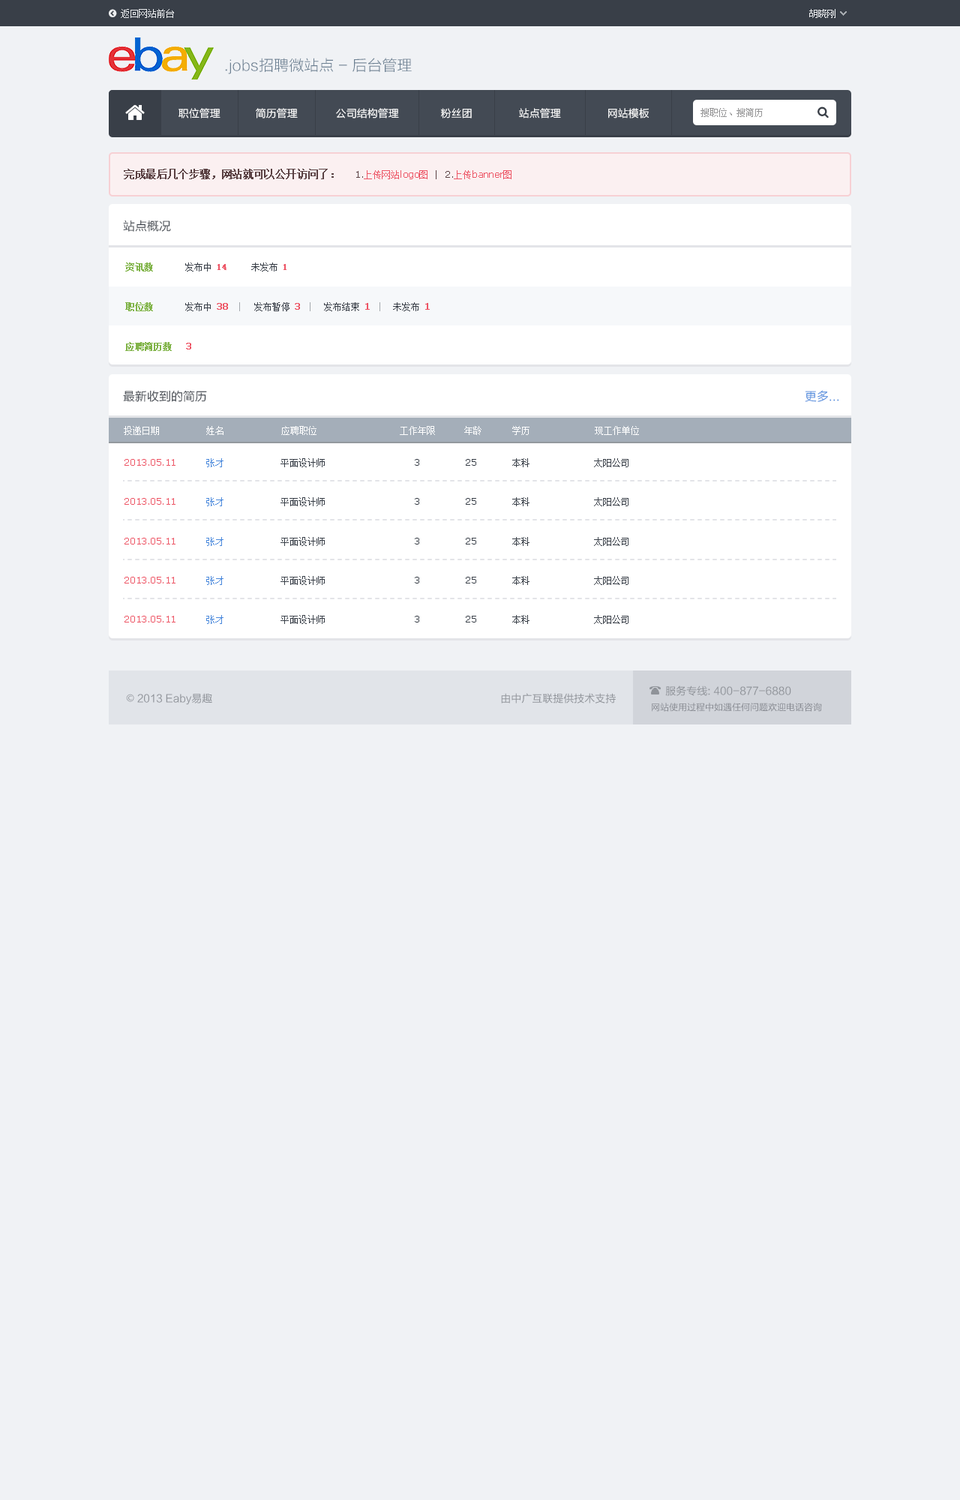
<style>
.page{position:relative;width:960px;height:1500px;background:#f0f2f5}
.page>*{position:absolute;margin:0}
.t1{font:9px "SimSun";color:#eceef0}
.t2{font:15px "FZLTXHK";color:#6c8092}
.t3{font:10.5px "FZLTXHK";color:#ffffff}
.t4{font:9px "SimSun";color:#959596}
.t5{font:10.5px "SimSun";color:#5a4143;font-weight:bold}
.t6{font:9px "Verdana";color:#ed5565}
.t7{font:9px "Verdana";color:#5a4143}
.t8{font:9px "SimSun";color:#ed5565}
.t9{font:12px "FZLTXHK";color:#393f48}
.t10{font:9px "SimSun";color:#81b449;font-weight:bold}
.t11{font:9px "SimSun";color:#393f48}
.t12{font:9px "SimSun";color:#ed5565;font-weight:bold}
.t13{font:9px "Verdana";color:#ed5565;font-weight:bold}
.t14{font:12px "FZLTXHK";color:#4b89dc}
.t15{font:9px "SimSun";color:#ffffff}
.t16{font:9px "SimSun";color:#4b89dc}
.t17{font:9px "Verdana";color:#393f48}
.t18{font:10.5px "FZLTHK--GBK1-0";color:#8f9399}
.t19{font:10.5px "AdobeHeitiStd-Regular";color:#8f9399}
.t20{font:9px "FZLTHJW--GB1-0";color:#868990}
</style>
<div class="page">
<p class="t1" style="left:121px;top:9px;width:53px;height:9px">返回网站前台</p>
<p class="t1" style="left:809px;top:9px;width:27px;height:9px">胡晓刚</p>
<p class="t2" style="left:225px;top:58px;width:187px;height:16px">.jobs招聘微站点 - 后台管理</p>
<p class="t3" style="left:178px;top:108px;width:42px;height:10px">职位管理</p>
<p class="t3" style="left:256px;top:108px;width:42px;height:10px">简历管理</p>
<p class="t3" style="left:336px;top:108px;width:63px;height:10px">公司结构管理</p>
<p class="t3" style="left:441px;top:108px;width:31px;height:10px">粉丝团</p>
<p class="t3" style="left:519px;top:108px;width:42px;height:10px">站点管理</p>
<p class="t3" style="left:608px;top:108px;width:41px;height:10px">网站模板</p>
<p class="t4" style="left:700px;top:108px;width:63px;height:9px">搜职位、搜简历</p>
<p class="t5" style="left:124px;top:169px;width:210px;height:10px">完成最后几个步骤，网站就可以公开访问了：</p>
<p class="t6" style="left:356px;top:170px;width:156px;height:9px"><span class="t7">1.</span><span class="t8">上传网站</span>logo<span class="t8">图  </span><span class="t7">|  2.</span><span class="t8">上传</span>banner<span class="t8">图</span></p>
<p class="t9" style="left:123px;top:220px;width:48px;height:12px">站点概况</p>
<p class="t10" style="left:125px;top:262px;width:28px;height:10px">资讯数</p>
<p class="t11" style="left:185px;top:262px;width:41px;height:10px">发布中 <span class="t12">14</span></p>
<p class="t11" style="left:251px;top:262px;width:35px;height:10px">未发布 <span class="t12">1</span></p>
<p class="t10" style="left:125px;top:302px;width:28px;height:9px">职位数</p>
<p class="t11" style="left:185px;top:302px;width:43px;height:9px">发布中 <span class="t13">38</span></p>
<p class="t11" style="left:254px;top:302px;width:46px;height:9px">发布暂停 <span class="t13">3</span></p>
<p class="t11" style="left:324px;top:302px;width:46px;height:9px">发布结束 <span class="t13">1</span></p>
<p class="t11" style="left:393px;top:302px;width:37px;height:9px">未发布 <span class="t13">1</span></p>
<p class="t10" style="left:125px;top:342px;width:47px;height:9px">应聘简历数</p>
<p class="t13" style="left:186px;top:343px;width:5px;height:7px">3</p>
<p class="t9" style="left:123px;top:390px;width:84px;height:12px">最新收到的简历</p>
<p class="t14" style="left:805px;top:390px;width:34px;height:12px">更多...</p>
<p class="t15" style="left:124px;top:426px;width:35px;height:9px">投递日期</p>
<p class="t15" style="left:206px;top:426px;width:18px;height:9px">姓名</p>
<p class="t15" style="left:281px;top:426px;width:35px;height:9px">应聘职位</p>
<p class="t15" style="left:400px;top:426px;width:35px;height:9px">工作年限</p>
<p class="t15" style="left:464px;top:426px;width:18px;height:9px">年龄</p>
<p class="t15" style="left:512px;top:426px;width:18px;height:9px">学历</p>
<p class="t15" style="left:595px;top:426px;width:44px;height:9px">现工作单位</p>
<p class="t6" style="left:124px;top:459px;width:52px;height:7px">2013.05.11</p>
<p class="t16" style="left:206px;top:458px;width:18px;height:9px">张才</p>
<p class="t11" style="left:280px;top:458px;width:45px;height:9px">平面设计师</p>
<p class="t17" style="left:415px;top:459px;width:4px;height:7px">3</p>
<p class="t17" style="left:466px;top:459px;width:10px;height:7px">25</p>
<p class="t11" style="left:512px;top:458px;width:18px;height:9px">本科</p>
<p class="t11" style="left:594px;top:458px;width:34px;height:9px">太阳公司</p>
<p class="t16" style="left:206px;top:497px;width:18px;height:9px">张才</p>
<p class="t11" style="left:280px;top:497px;width:45px;height:9px">平面设计师</p>
<p class="t11" style="left:512px;top:497px;width:18px;height:9px">本科</p>
<p class="t11" style="left:594px;top:497px;width:34px;height:9px">太阳公司</p>
<p class="t6" style="left:124px;top:498px;width:52px;height:7px">2013.05.11</p>
<p class="t17" style="left:415px;top:498px;width:4px;height:7px">3</p>
<p class="t17" style="left:466px;top:498px;width:10px;height:7px">25</p>
<p class="t6" style="left:124px;top:538px;width:52px;height:6px">2013.05.11</p>
<p class="t16" style="left:206px;top:537px;width:18px;height:9px">张才</p>
<p class="t11" style="left:280px;top:537px;width:45px;height:9px">平面设计师</p>
<p class="t17" style="left:415px;top:538px;width:4px;height:6px">3</p>
<p class="t17" style="left:466px;top:538px;width:10px;height:6px">25</p>
<p class="t11" style="left:512px;top:537px;width:18px;height:9px">本科</p>
<p class="t11" style="left:594px;top:537px;width:34px;height:9px">太阳公司</p>
<p class="t6" style="left:124px;top:577px;width:52px;height:7px">2013.05.11</p>
<p class="t16" style="left:206px;top:576px;width:18px;height:9px">张才</p>
<p class="t11" style="left:280px;top:576px;width:45px;height:9px">平面设计师</p>
<p class="t17" style="left:415px;top:577px;width:4px;height:7px">3</p>
<p class="t17" style="left:466px;top:577px;width:10px;height:7px">25</p>
<p class="t11" style="left:512px;top:576px;width:18px;height:9px">本科</p>
<p class="t11" style="left:594px;top:576px;width:34px;height:9px">太阳公司</p>
<p class="t6" style="left:124px;top:616px;width:52px;height:6px">2013.05.11</p>
<p class="t16" style="left:206px;top:615px;width:18px;height:9px">张才</p>
<p class="t11" style="left:280px;top:615px;width:45px;height:9px">平面设计师</p>
<p class="t17" style="left:415px;top:616px;width:4px;height:6px">3</p>
<p class="t17" style="left:466px;top:616px;width:10px;height:6px">25</p>
<p class="t11" style="left:512px;top:615px;width:18px;height:9px">本科</p>
<p class="t11" style="left:594px;top:615px;width:34px;height:9px">太阳公司</p>
<p class="t18" style="left:665px;top:686px;width:126px;height:10px">服务专线: 400-877-6880</p>
<p class="t18" style="left:126px;top:693px;width:86px;height:12px"><span class="t19">©</span> 2013 Eaby易趣</p>
<p class="t18" style="left:501px;top:693px;width:115px;height:11px">由中广互联提供技术支持</p>
<p class="t20" style="left:652px;top:703px;width:170px;height:9px">网站使用过程中如遇任何问题欢迎电话咨询</p>
</div>
